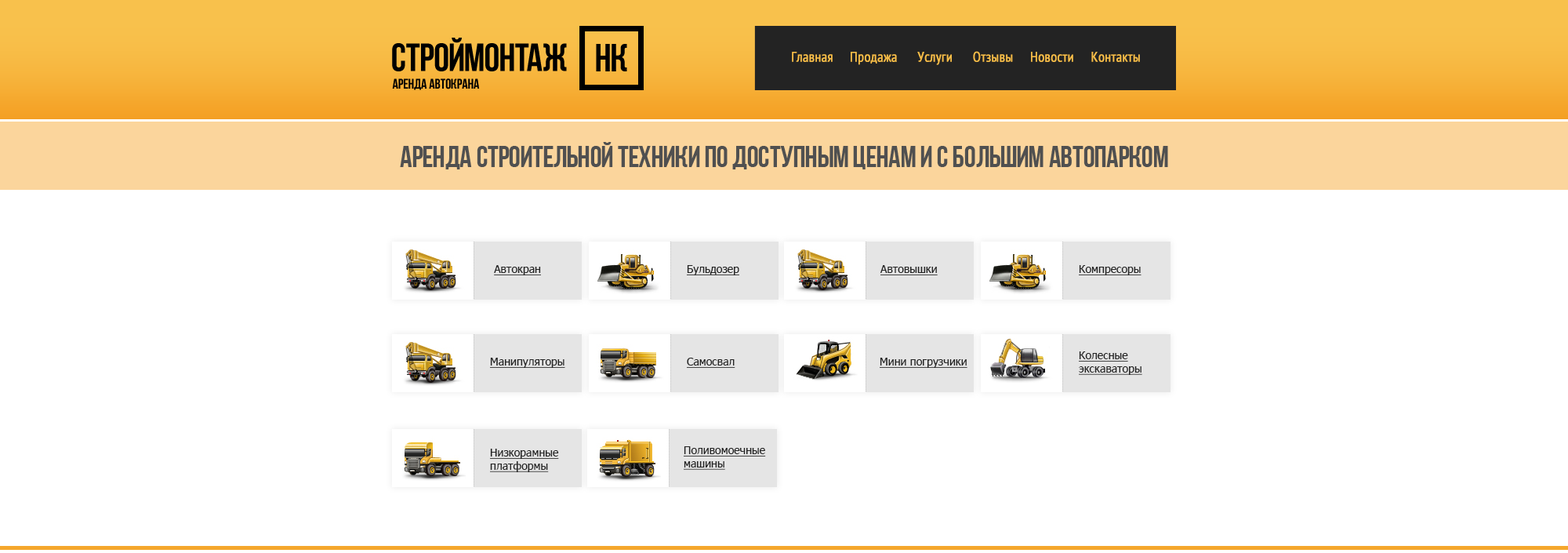
<style>
.page{position:relative;width:1568px;height:553px;background:#ffffff}
.page>*{position:absolute;margin:0}
.t1{font:14.1px "PTSans-Narrow";color:#f8be48;font-weight:bold}
.t2{font:29.8px "AA-BebasNeue";color:#505050}
.t3{font:11px "Tahoma";color:#232323;text-decoration:underline}
</style>
<div class="page">
<p class="t1" style="left:792px;top:51px;width:348px;height:14px">Главная     Продажа      Услуги      Отзывы     Новости     Контакты</p>
<p class="t2" style="left:400px;top:142px;width:768px;height:27px">Аренда строительной техники по доступным ценам и с большим автопарком</p>
<p class="t3" style="left:494px;top:265px;width:47px;height:10px">Автокран</p>
<p class="t3" style="left:687px;top:265px;width:52px;height:10px">Бульдозер</p>
<p class="t3" style="left:880px;top:265px;width:58px;height:10px">Автовышки</p>
<p class="t3" style="left:1079px;top:265px;width:63px;height:10px">Компресоры</p>
<p class="t3" style="left:1079px;top:351px;width:63px;height:24px">Колесные<br>экскаваторы</p>
<p class="t3" style="left:490px;top:358px;width:75px;height:10px">Манипуляторы</p>
<p class="t3" style="left:687px;top:358px;width:48px;height:10px">Самосвал</p>
<p class="t3" style="left:880px;top:358px;width:87px;height:10px">Мини погрузчики</p>
<p class="t3" style="left:490px;top:448px;width:69px;height:24px">Низкорамные<br>платформы</p>
<p class="t3" style="left:684px;top:446px;width:82px;height:24px">Поливомоечные<br>машины</p>
</div>
